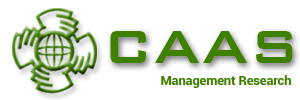
<style>
.page{position:relative;width:300px;height:100px;background:#ffffff}
.page>*{position:absolute;margin:0}
.t1{font:62.5px "BankGothic-Medium";color:#3e7f00}
.t2{font:12.7px "Roboto-Bold";color:#3e7f00}
</style>
<div class="page">
<p class="t1" style="left:110px;top:31px;width:183px;height:32px">CAAS</p>
<p class="t2" style="left:161px;top:75px;width:130px;height:13px">Management Research</p>
</div>
